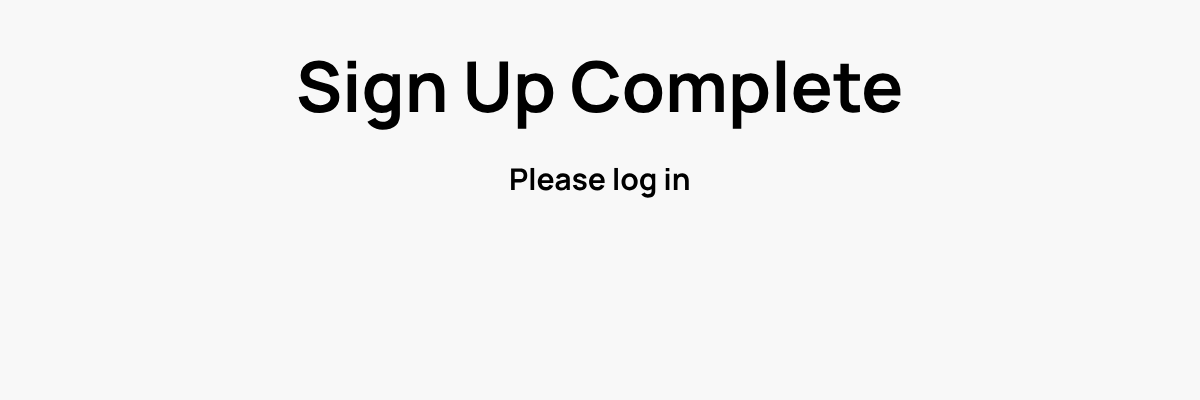
<style>
.page{position:relative;width:1200px;height:400px;background:#f8f8f8}
.page>*{position:absolute;margin:0}
.t1{font:70px "Manrope-Bold";color:#000000}
.t2{font:30px "Manrope-Bold";color:#000000}
</style>
<div class="page">
<p class="t1" style="left:298px;top:60px;width:603px;height:70px">Sign Up Complete</p>
<p class="t2" style="left:511px;top:167px;width:178px;height:31px">Please log in</p>
</div>
